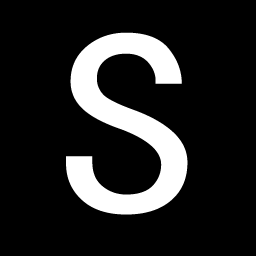
<style>
.page{position:relative;width:256px;height:256px;background:#000000}
.page>*{position:absolute;margin:0}
.t1{font:265.6px "SimHei";letter-spacing:0.14em;color:#ffffff;scale:1.09 1}
</style>
<div class="page">
<p class="t1" style="left:66px;top:32px;width:122px;height:183px">S</p>
</div>
